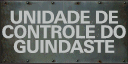
<style>
.page{position:relative;width:128px;height:64px}
.page>*{position:absolute;margin:0}
.t1{font:17.3px/14.7px "UniversNextPro-Bold";letter-spacing:-0.03em;color:#bfc2c1;text-transform:uppercase}
</style>
<div class="page">
<p class="t1" style="left:2px;top:10px;width:124px;height:43px;text-align:center">Unidade de<br>controle do<br>guindaste</p>
</div>
